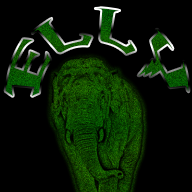
<style>
.page{position:relative;width:192px;height:192px;background:#000000}
.page>*{position:absolute;margin:0}
.t1{font:46.4px "HarryP";color:#0a5601}
</style>
<div class="page">
<p class="t1" style="left:5px;top:8px;width:184px;height:88px">ELLY</p>
</div>
